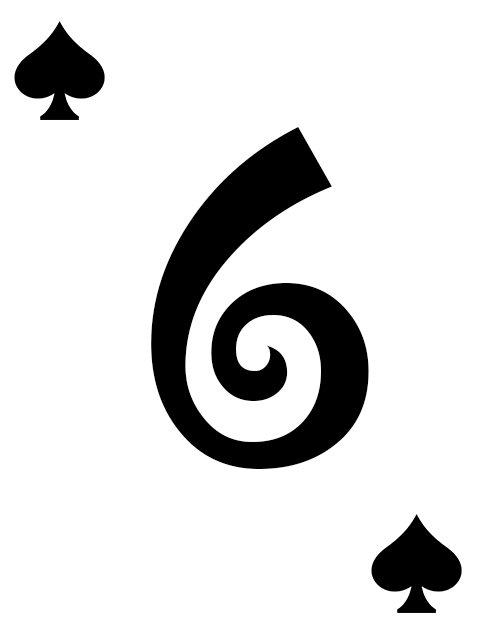
<style>
.page{position:relative;width:480px;height:640px;background:#ffffff}
.page>*{position:absolute;margin:0}
.t1{font:386.3px "Jokerman-Regular";color:#000000}
</style>
<div class="page">
<p class="t1" style="left:151px;top:127px;width:218px;height:342px">6</p>
</div>
